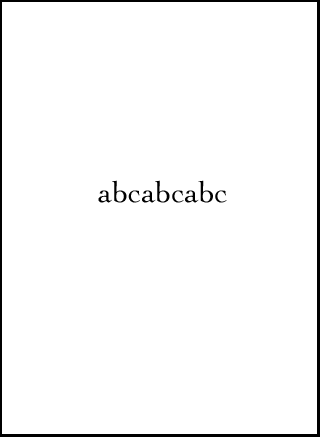
<style>
.page{position:relative;width:320px;height:437px;background:#ffffff}
.page>*{position:absolute;margin:0}
.t1{font:29.9px "Cochin";color:#000000}
</style>
<div class="page">
<p class="t1" style="left:98px;top:180px;width:129px;height:23px">abcabcabc</p>
</div>
